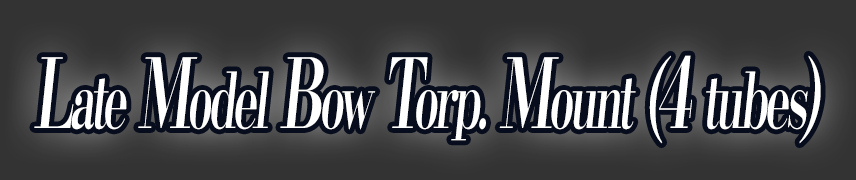
<style>
.page{position:relative;width:856px;height:180px;background:#333333}
.page>*{position:absolute;margin:0}
.t1{font:76.8px "KochoStd-Heavy";letter-spacing:-0.08em;color:#ffffff;font-style:italic;scale:0.59 1}
.t2{font:96px "KochoStd-Heavy";letter-spacing:-0.08em;color:#ffffff;font-style:italic;scale:0.59 1}
</style>
<div class="page">
<p class="t1" style="left:34px;top:55px;width:787px;height:89px"><span class="t2">L</span>ate<span class="t2"> M</span>odel<span class="t2"> B</span>ow<span class="t2"> T</span>orp.<span class="t2"> M</span>ount<span class="t2"> (4 </span>tubes<span class="t2">)</span></p>
</div>
